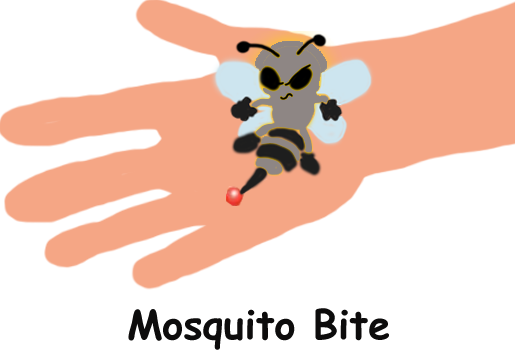
<style>
.page{position:relative;width:515px;height:362px;background:#ffffff}
.page>*{position:absolute;margin:0}
.t1{font:40px "ComicSansMS-Bold";color:#0d0c0c}
</style>
<div class="page">
<p class="t1" style="left:128px;top:308px;width:261px;height:42px">Mosquito Bite</p>
</div>
